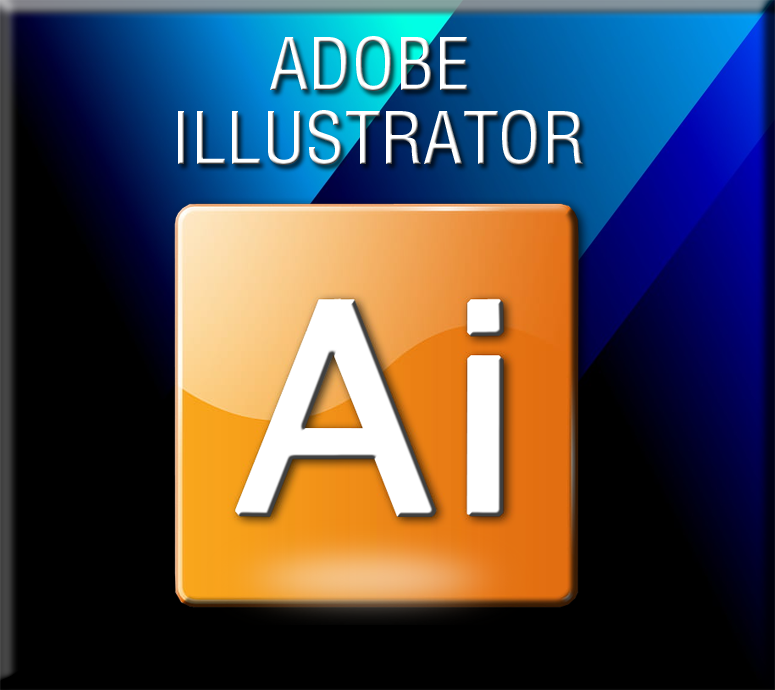
<style>
.page{position:relative;width:775px;height:690px;background:#000000}
.page>*{position:absolute;margin:0}
.t1{font:71px "HelveticaLTStd-Cond";color:#ffffff}
</style>
<div class="page">
<p class="t1" style="left:270px;top:36px;width:197px;height:55px">ADOBE</p>
<p class="t1" style="left:178px;top:110px;width:405px;height:55px">ILLUSTRATOR</p>
</div>
